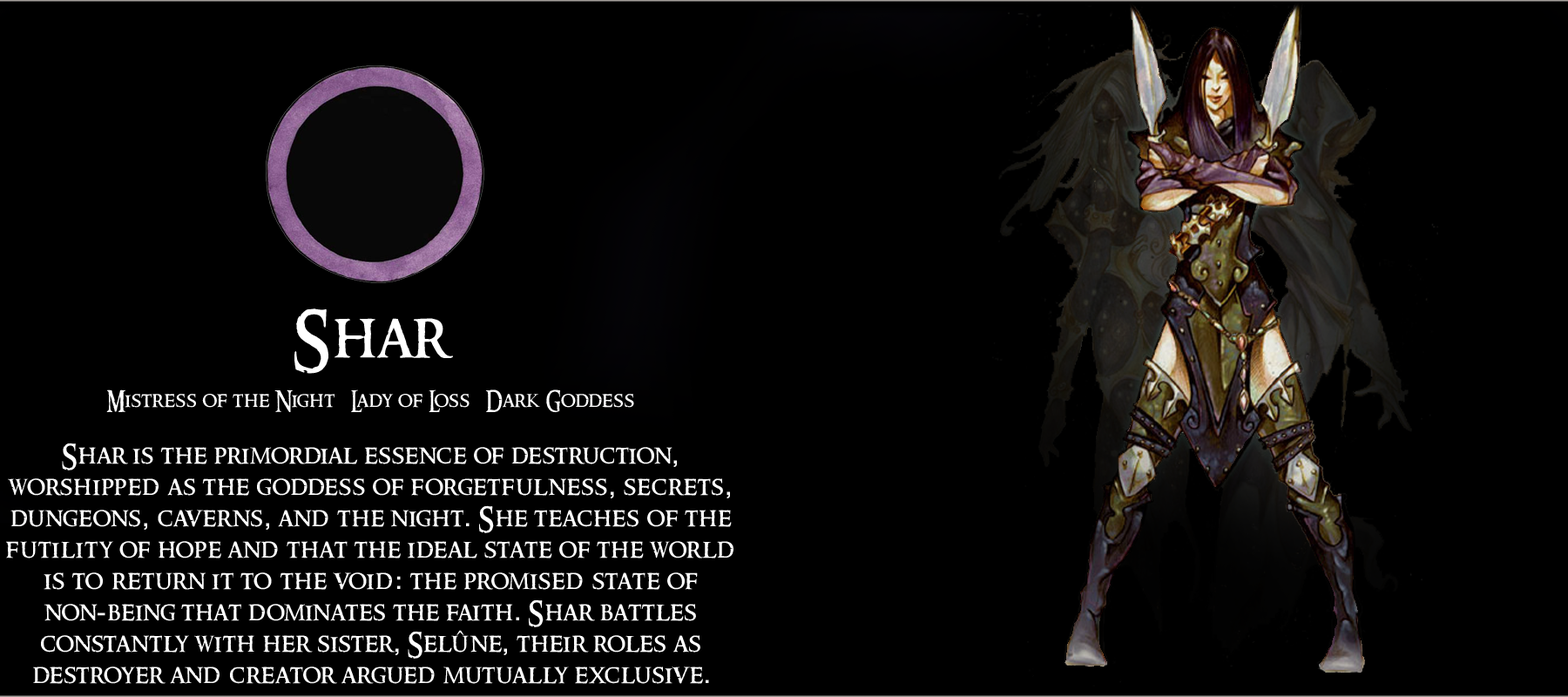
<style>
.page{position:relative;width:1568px;height:697px;background:#000000}
.page>*{position:absolute;margin:0}
.t1{font:26.1px "RingbearerMedium";letter-spacing:0.025em;color:#ffffff}
.t2{font:62.7px "RingbearerMedium";letter-spacing:0.025em;color:#ffffff}
.t3{font:20.9px "RingbearerMedium";letter-spacing:0.025em;color:#ffffff}
.t4{font:26.1px "Rockwell";letter-spacing:0.025em;color:#ffffff}
</style>
<div class="page">
<p class="t1" style="left:6px;top:308px;width:727px;height:376px;text-align:center"><span class="t2">Shar<br></span><span class="t3"><br>Mistress of the Night   Lady of Loss   Dark Goddess<br><br></span>Shar is the primordial essence of destruction<span class="t4">,</span> <br>worshipped as the goddess of forgetfulness<span class="t4">,</span> secrets<span class="t4">,</span> dungeons<span class="t4">,</span> caverns<span class="t4">,</span> and the night<span class="t4">.</span> She teaches of the futility of hope and that the ideal state of the world is to return it to the void<span class="t4">:</span> the promised state of <br>non<span class="t4">-</span>being that dominates the faith<span class="t4">.</span> Shar battles <br>constantly with her sister<span class="t4">,</span> Selûne<span class="t4">,</span> their roles as <br>destroyer and creator argued mutually exclusive<span class="t4">.</span></p>
</div>
